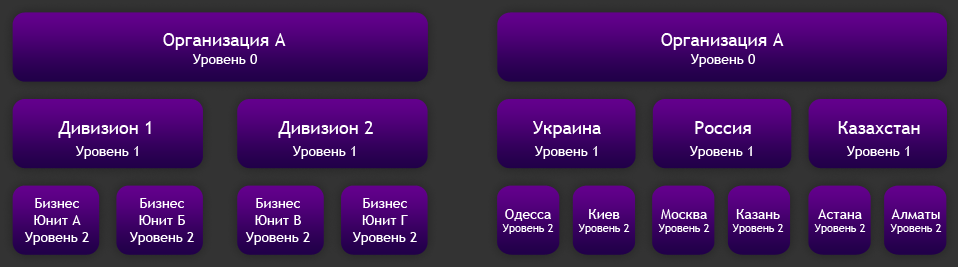
<style>
.page{position:relative;width:958px;height:267px}
.page>*{position:absolute;margin:0}
.t1{font:18px "TrebuchetMS";color:#ffffff}
.t2{font:14px "TrebuchetMS";color:#ffffff}
.t3{font:11px "TrebuchetMS";color:#ffffff}
</style>
<div class="page">
<p class="t1" style="left:163px;top:33px;width:123px;height:17px">Организация А</p>
<p class="t1" style="left:661px;top:33px;width:123px;height:17px">Организация А</p>
<p class="t2" style="left:192px;top:54px;width:65px;height:13px">Уровень 0</p>
<p class="t2" style="left:690px;top:54px;width:65px;height:13px">Уровень 0</p>
<p class="t1" style="left:58px;top:121px;width:93px;height:17px">Дивизион 1</p>
<p class="t1" style="left:278px;top:121px;width:95px;height:17px">Дивизион 2</p>
<p class="t1" style="left:533px;top:121px;width:68px;height:17px">Украина</p>
<p class="t1" style="left:695px;top:121px;width:56px;height:13px">Россия</p>
<p class="t1" style="left:838px;top:121px;width:82px;height:13px">Казахстан</p>
<p class="t2" style="left:75px;top:146px;width:63px;height:13px">Уровень 1</p>
<p class="t2" style="left:292px;top:146px;width:63px;height:13px">Уровень 1</p>
<p class="t2" style="left:534px;top:146px;width:63px;height:13px">Уровень 1</p>
<p class="t2" style="left:689px;top:146px;width:63px;height:13px">Уровень 1</p>
<p class="t2" style="left:846px;top:146px;width:63px;height:13px">Уровень 1</p>
<p class="t2" style="left:24px;top:198px;width:65px;height:47px;text-align:center">Бизнес<br>Юнит А<br>Уровень 2</p>
<p class="t2" style="left:129px;top:198px;width:65px;height:47px;text-align:center">Бизнес<br>Юнит Б<br>Уровень 2</p>
<p class="t2" style="left:245px;top:198px;width:65px;height:47px;text-align:center">Бизнес<br>Юнит В<br>Уровень 2</p>
<p class="t2" style="left:352px;top:198px;width:65px;height:47px;text-align:center">Бизнес<br>Юнит Г<br>Уровень 2</p>
<p class="t3" style="left:502px;top:209px;width:52px;height:25px;text-align:center"><span class="t2">Одесса<br></span>Уровень 2</p>
<p class="t3" style="left:578px;top:209px;width:52px;height:25px;text-align:center"><span class="t2">Киев<br></span>Уровень 2</p>
<p class="t3" style="left:658px;top:209px;width:52px;height:25px;text-align:center"><span class="t2">Москва<br></span>Уровень 2</p>
<p class="t3" style="left:732px;top:209px;width:52px;height:25px;text-align:center"><span class="t2">Казань<br></span>Уровень 2</p>
<p class="t3" style="left:814px;top:209px;width:52px;height:25px;text-align:center"><span class="t2">Астана<br></span>Уровень 2</p>
<p class="t3" style="left:890px;top:209px;width:52px;height:25px;text-align:center"><span class="t2">Алматы<br></span>Уровень 2</p>
</div>
